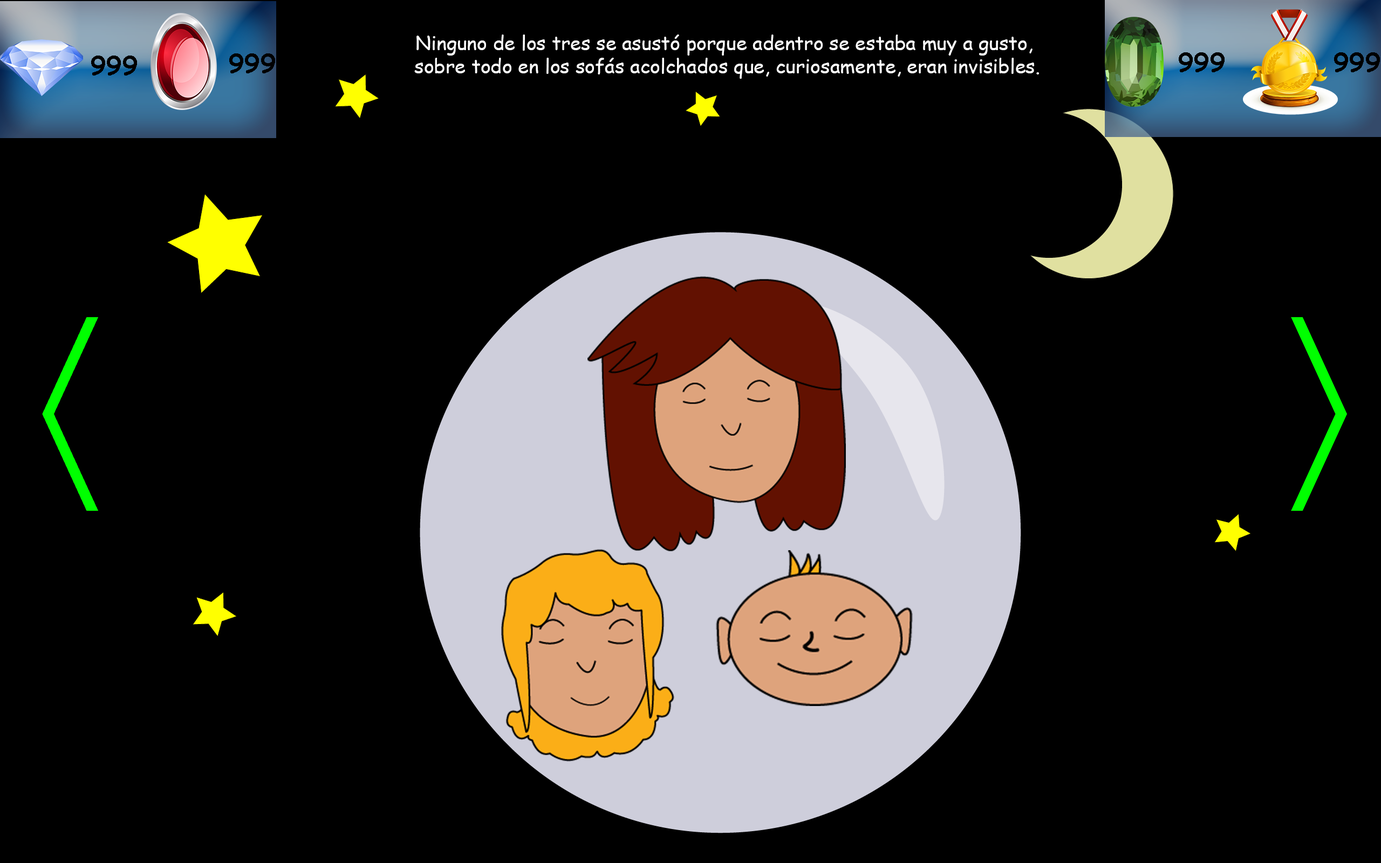
<style>
.page{position:relative;width:1381px;height:863px;background:#000000}
.page>*{position:absolute;margin:0}
.t1{font:19.4px "ComicSansMS";color:#ffffff}
.t2{font:25.9px "ComicSansMS-Bold";color:#010101}
.t3{font:25.9px "ComicSansMS-Bold";color:#000000}
</style>
<div class="page">
<p class="t1" style="left:414px;top:35px;width:625px;height:44px;text-align:center">Ninguno de los tres se asustó porque adentro se estaba muy a gusto, <br>sobre todo en los sofás acolchados que, curiosamente, eran invisibles.</p>
<p class="t2" style="left:229px;top:53px;width:46px;height:20px">999</p>
<p class="t2" style="left:1179px;top:52px;width:46px;height:20px">999</p>
<p class="t3" style="left:1334px;top:52px;width:46px;height:20px">999</p>
<p class="t3" style="left:91px;top:56px;width:46px;height:20px">999</p>
</div>
